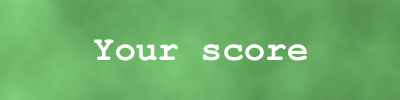
<style>
.page{position:relative;width:400px;height:100px}
.page>*{position:absolute;margin:0}
.t1{font:35.9px "CourierNewPS-BoldMT";color:#ffffff}
</style>
<div class="page">
<p class="t1" style="left:94px;top:39px;width:213px;height:22px">Your score</p>
</div>
